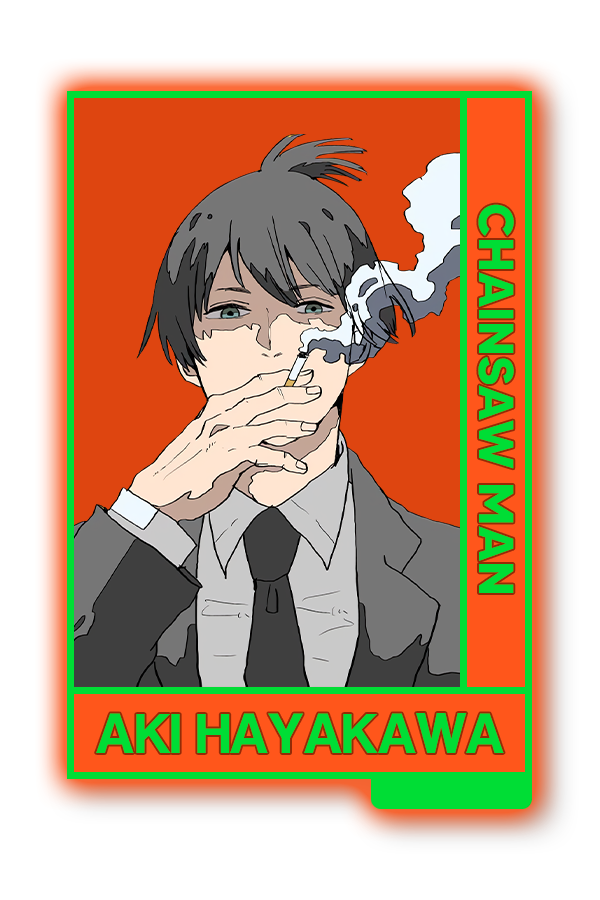
<style>
.page{position:relative;width:600px;height:900px;background:#ffffff}
.page>*{position:absolute;margin:0}
.t1{font:48.8px "MADETOMMY-Bold";color:#00dd35}
.t2{font:59.1px "CoolveticaRg-Regular";color:#00dd35}
</style>
<div class="page">
<p class="t1" style="left:478px;top:204px;width:36px;height:389px;rotate:90deg">CHAINSAW MAN</p>
<p class="t2" style="left:96px;top:713px;width:408px;height:40px">AKI HAYAKAWA</p>
</div>
